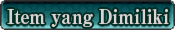
<style>
.page{position:relative;width:175px;height:30px}
.page>*{position:absolute;margin:0}
.t1{font:20px "RyuminPro-ExBold";color:#d9d4d2;scale:0.9 1}
</style>
<div class="page">
<p class="t1" style="left:7px;top:9px;width:162px;height:18px">Item yang Dimiliki</p>
</div>
